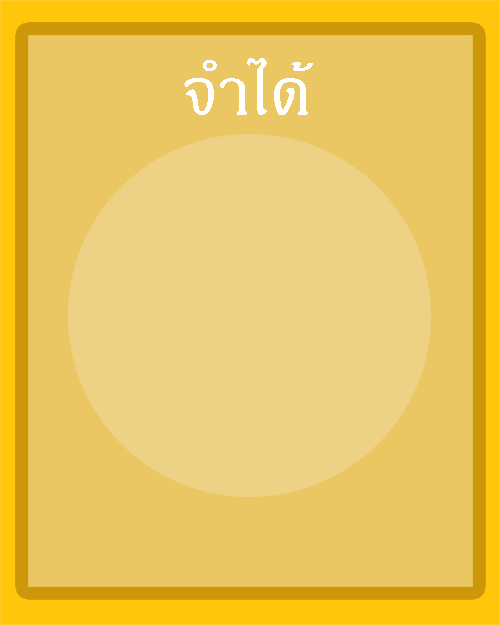
<style>
.page{position:relative;width:500px;height:625px;background:#ebc764}
.page>*{position:absolute;margin:0}
.t1{font:91.7px "JasmineUPC";color:#ffffff}
</style>
<div class="page">
<p class="t1" style="left:184px;top:58px;width:129px;height:57px">จำได้</p>
</div>
